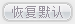
<style>
.page{position:relative;width:75px;height:24px}
.page>*{position:absolute;margin:0}
.t1{font:13px "SimSun";letter-spacing:0.008em;color:#98929d}
</style>
<div class="page">
<p class="t1" style="left:12px;top:6px;width:51px;height:12px">恢复默认</p>
</div>
